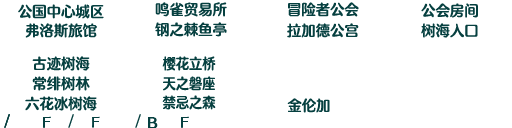
<style>
.page{position:relative;width:512px;height:128px;background:#ffffff}
.page>*{position:absolute;margin:0}
.t1{font:14.7px "FZFW-QingYinTiS-B--GB1-0";color:#064040}
.t2{font:14.7px "FZFW-QingYinTiS-B--GB1-0";color:#064040;scale:0.9 1}
</style>
<div class="page">
<p class="t1" style="left:18px;top:4px;width:86px;height:15px">公国中心城区</p>
<p class="t1" style="left:155px;top:2px;width:72px;height:15px">鸣雀贸易所</p>
<p class="t1" style="left:288px;top:2px;width:71px;height:15px">冒险者公会</p>
<p class="t1" style="left:421px;top:3px;width:57px;height:15px">公会房间</p>
<p class="t1" style="left:25px;top:23px;width:72px;height:15px">弗洛斯旅馆</p>
<p class="t1" style="left:155px;top:22px;width:72px;height:15px">钢之棘鱼亭</p>
<p class="t1" style="left:287px;top:23px;width:72px;height:15px">拉加德公宫</p>
<p class="t1" style="left:421px;top:23px;width:57px;height:15px">树海入口</p>
<p class="t1" style="left:32px;top:56px;width:58px;height:15px">古迹树海</p>
<p class="t2" style="left:162px;top:56px;width:54px;height:15px">樱花立桥</p>
<p class="t1" style="left:32px;top:76px;width:58px;height:15px">常绯树林</p>
<p class="t2" style="left:163px;top:76px;width:52px;height:15px">天之磐座</p>
<p class="t1" style="left:25px;top:96px;width:72px;height:15px">六花冰树海</p>
<p class="t2" style="left:162px;top:95px;width:54px;height:15px">禁忌之森</p>
<p class="t1" style="left:287px;top:98px;width:43px;height:15px">金伦加</p>
</div>
